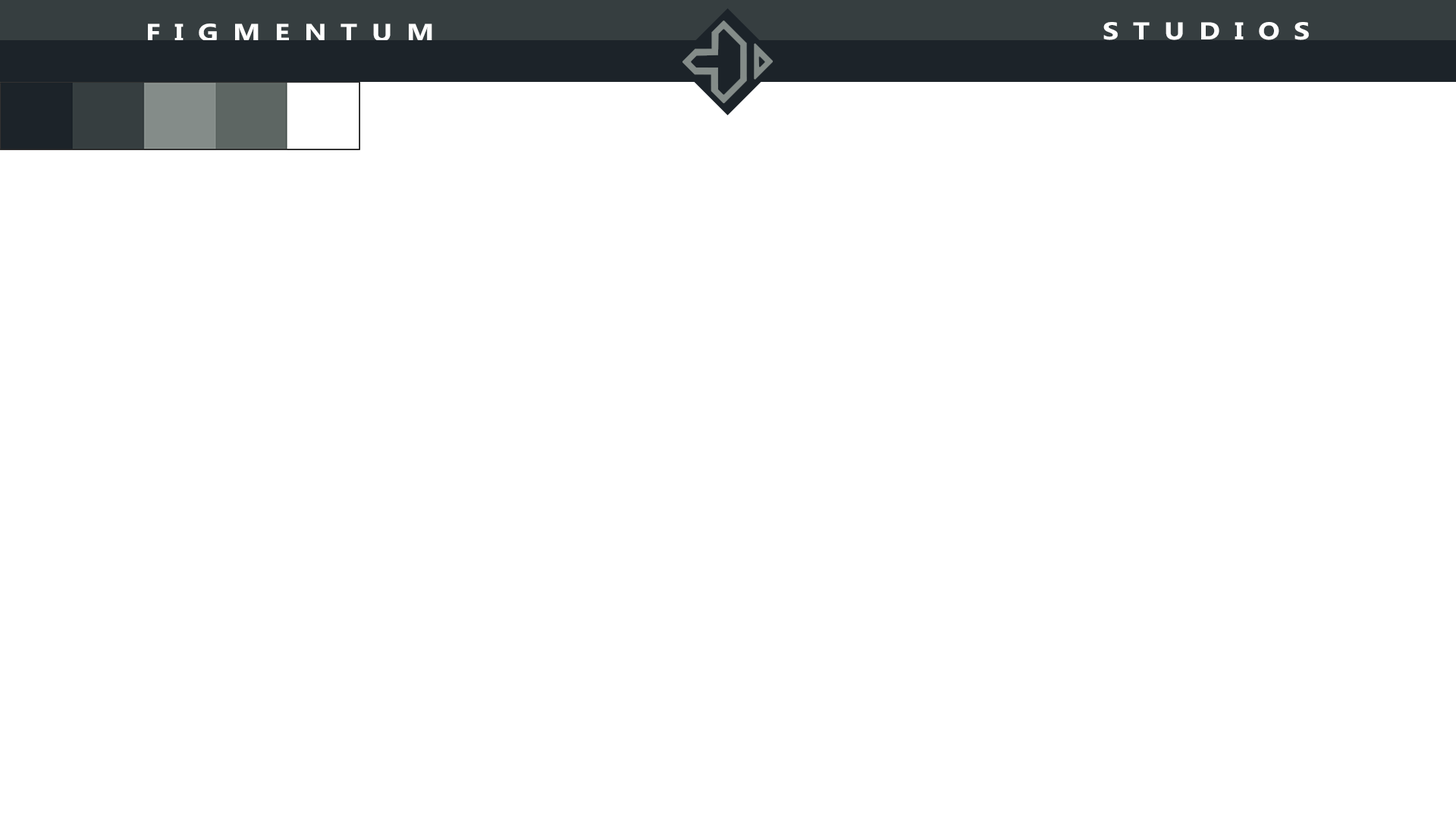
<style>
.page{position:relative;width:1456px;height:819px;background:#ffffff}
.page>*{position:absolute;margin:0}
.t1{font:24.4px "MicrosoftPhagsPa-Bold";letter-spacing:0.5em;color:#ffffff;scale:1.17 1}
</style>
<div class="page">
<p class="t1" style="left:148px;top:24px;width:284px;height:18px">FIGMENTUM</p>
<p class="t1" style="left:1103px;top:22px;width:206px;height:18px">STUDIOS</p>
</div>
